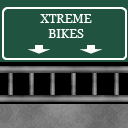
<style>
.page{position:relative;width:128px;height:128px;background:#205340}
.page>*{position:absolute;margin:0}
.t1{font:12px "Georgia";color:#ffffff}
</style>
<div class="page">
<p class="t1" style="left:40px;top:14px;width:52px;height:24px;text-align:center">XTREME<br>BIKES</p>
</div>
